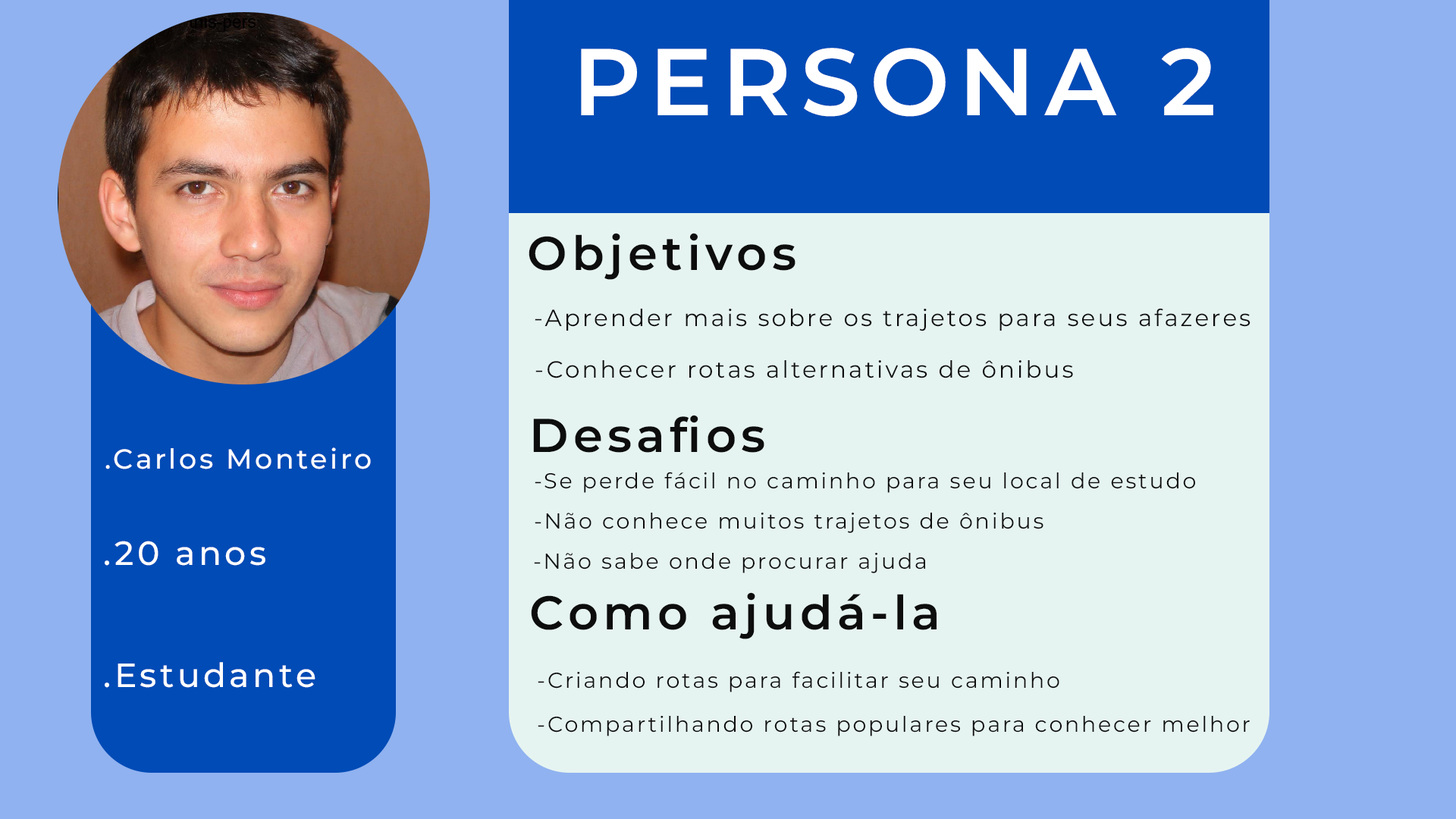
<style>
.page{position:relative;width:1456px;height:819px;background:#90b2f0}
.page>*{position:absolute;margin:0}
.t1{font:94.6px "MontserratRoman-SemiBold";letter-spacing:0.1em;color:#ffffff}
.t2{font:47.3px "MontserratRoman-SemiBold";letter-spacing:0.1em;color:#0d0d0d}
.t3{font:23.5px "MontserratRoman-Regular";letter-spacing:0.1em;color:#0d0d0d}
.t4{font:27.5px "MontserratRoman-Medium";letter-spacing:0.1em;color:#ffffff}
.t5{font:21.6px "MontserratRoman-Regular";letter-spacing:0.1em;color:#0d0d0d}
.t6{font:33.5px "MontserratRoman-Medium";letter-spacing:0.1em;color:#ffffff}
</style>
<div class="page">
<p class="t1" style="left:581px;top:48px;width:632px;height:69px">PERSONA 2</p>
<p class="t2" style="left:529px;top:233px;width:266px;height:47px">Objetivos</p>
<p class="t3" style="left:535px;top:309px;width:715px;height:22px">-Aprender mais sobre os trajetos para seus afazeres</p>
<p class="t3" style="left:535px;top:360px;width:538px;height:18px">-Conhecer rotas alternativas de ônibus</p>
<p class="t2" style="left:533px;top:415px;width:231px;height:38px">Desafios</p>
<p class="t4" style="left:105px;top:447px;width:266px;height:22px">.Carlos Monteiro</p>
<p class="t5" style="left:535px;top:472px;width:660px;height:21px">-Se perde fácil no caminho para seu local de estudo</p>
<p class="t5" style="left:535px;top:513px;width:508px;height:20px">-Não conhece muitos trajetos de ônibus</p>
<p class="t6" style="left:105px;top:541px;width:160px;height:25px">.20 anos</p>
<p class="t5" style="left:534px;top:553px;width:391px;height:20px">-Não sabe onde procurar ajuda</p>
<p class="t2" style="left:531px;top:592px;width:406px;height:47px">Como ajudá-la</p>
<p class="t6" style="left:105px;top:662px;width:210px;height:26px">.Estudante</p>
<p class="t5" style="left:538px;top:671px;width:521px;height:21px">-Criando rotas para facilitar seu caminho</p>
<p class="t5" style="left:538px;top:716px;width:712px;height:20px">-Compartilhando rotas populares para conhecer melhor</p>
</div>
